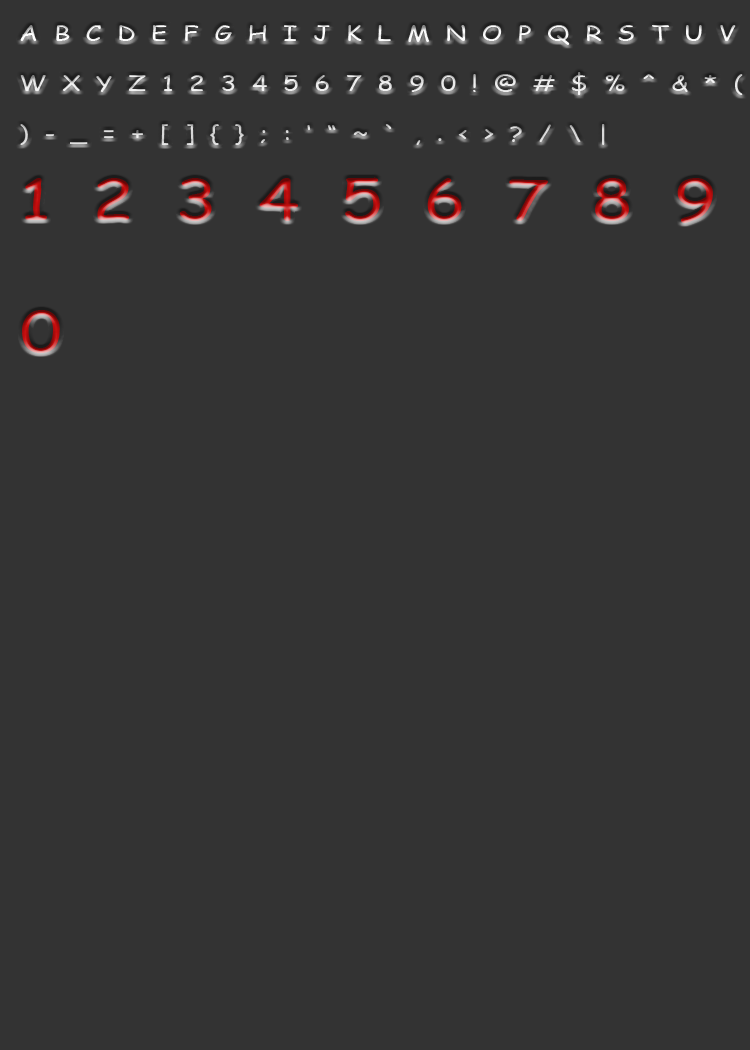
<style>
.page{position:relative;width:750px;height:1050px;background:#333333}
.page>*{position:absolute;margin:0}
.t1{font:20.8px "ComicSansMS";scale:1.25 1}
.t2{font:55.1px "ComicSansMS";scale:1.25 1}
</style>
<div class="page">
<p class="t1" style="left:20px;top:24px;width:723px;height:121px">A  B  C  D  E  F  G  H  I  J  K  L  M  N  O  P  Q  R  S  T  U  V<br><br>W  X  Y  Z  1  2  3  4  5  6  7  8  9  0  !  @  #  $  %  ^  &amp;  *  (<br><br>)  -  _  =  +  [  ]  {  }  ;  :  ‘  “  ~  `  ,  .  &lt;  &gt;  ?  /  \  |</p>
<p class="t2" style="left:22px;top:177px;width:691px;height:176px">1  2  3  4  5  6  7  8  9 <br><br>0</p>
</div>
